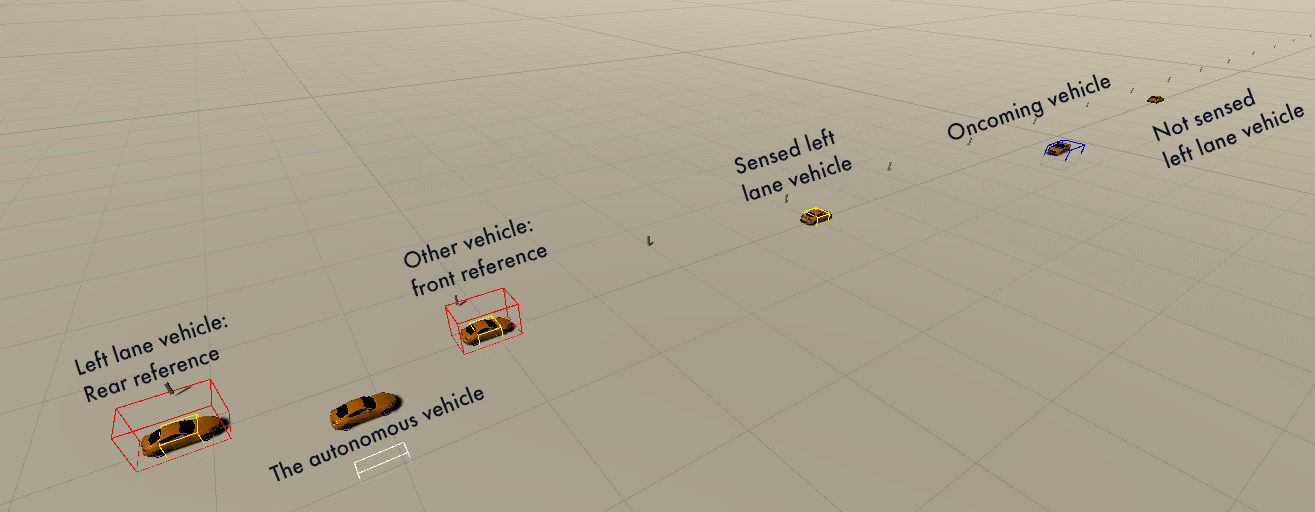
<style>
.page{position:relative;width:1315px;height:512px}
.page>*{position:absolute;margin:0}
.t1{font:24px "FuturaRound-Medium";color:#0b1326}
</style>
<div class="page">
<p class="t1" style="left:947px;top:74px;width:164px;height:66px;rotate:-19deg">Oncoming vehicle</p>
<p class="t1" style="left:1152px;top:87px;width:152px;height:82px;rotate:-21deg">Not sensed<br>left lane vehicle</p>
<p class="t1" style="left:734px;top:128px;width:118px;height:74px;rotate:-17deg">Sensed left<br>lane vehicle</p>
<p class="t1" style="left:404px;top:219px;width:143px;height:78px;rotate:-17deg">Other vehicle:<br>front reference</p>
<p class="t1" style="left:74px;top:315px;width:154px;height:88px;rotate:-18deg">Left lane vehicle:<br>Rear reference</p>
<p class="t1" style="left:268px;top:386px;width:216px;height:96px;rotate:-22deg">The autonomous vehicle</p>
</div>
